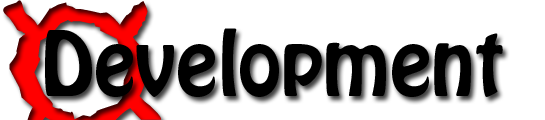
<style>
.page{position:relative;width:545px;height:120px;background:#ffffff}
.page>*{position:absolute;margin:0}
.t1{font:375px "Gigi-Regular"}
.t2{font:79.2px "HoboStd";color:#000000}
</style>
<div class="page">
<p class="t1" style="left:3px;top:0px;width:158px;height:120px">¤</p>
<p class="t2" style="left:45px;top:28px;width:458px;height:69px">Development</p>
</div>
